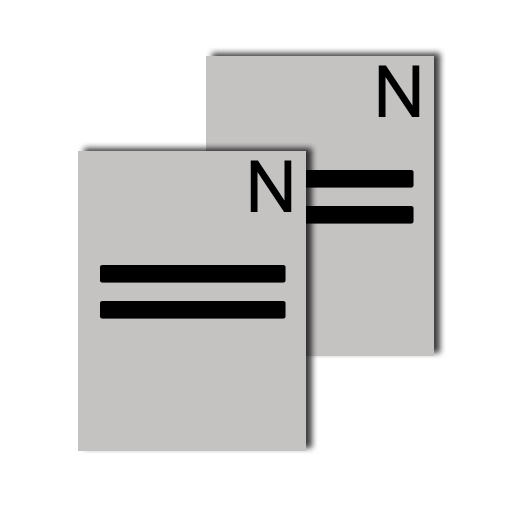
<style>
.page{position:relative;width:512px;height:512px;background:#ffffff}
.page>*{position:absolute;margin:0}
.t1{font:72px "ArialMT";color:#000000}
</style>
<div class="page">
<p class="t1" style="left:378px;top:65px;width:42px;height:52px">N</p>
<p class="t1" style="left:250px;top:160px;width:42px;height:52px">N</p>
</div>
